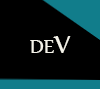
<style>
.page{position:relative;width:100px;height:89px;background:#000000}
.page>*{position:absolute;margin:0}
.t1{font:22px "Nyala-Regular";color:#f4f2e9}
.t2{font:30px "Nyala-Regular";color:#f4f2e9}
</style>
<div class="page">
<p class="t1" style="left:30px;top:36px;width:41px;height:17px">DE<span class="t2">V</span></p>
</div>
